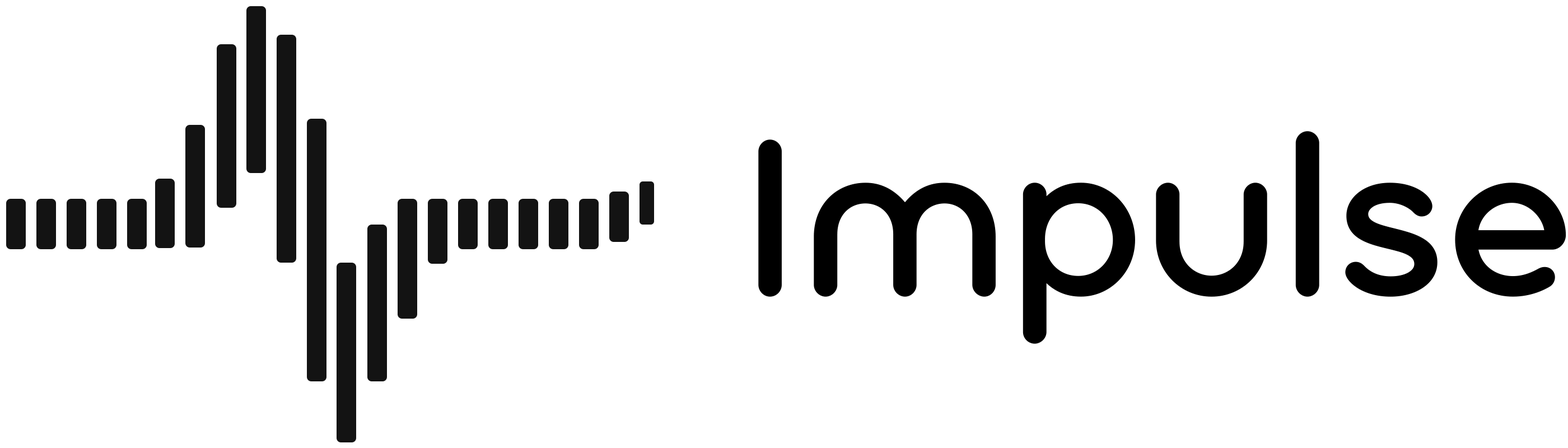
<style>
.page{position:relative;width:1568px;height:448px;background:#ffffff}
.page>*{position:absolute;margin:0}
.t1{font:213.2px "UltimaPro";letter-spacing:-0.02em;color:#000000;font-weight:bold}
</style>
<div class="page">
<p class="t1" style="left:758px;top:131px;width:808px;height:213px">Impulse</p>
</div>
